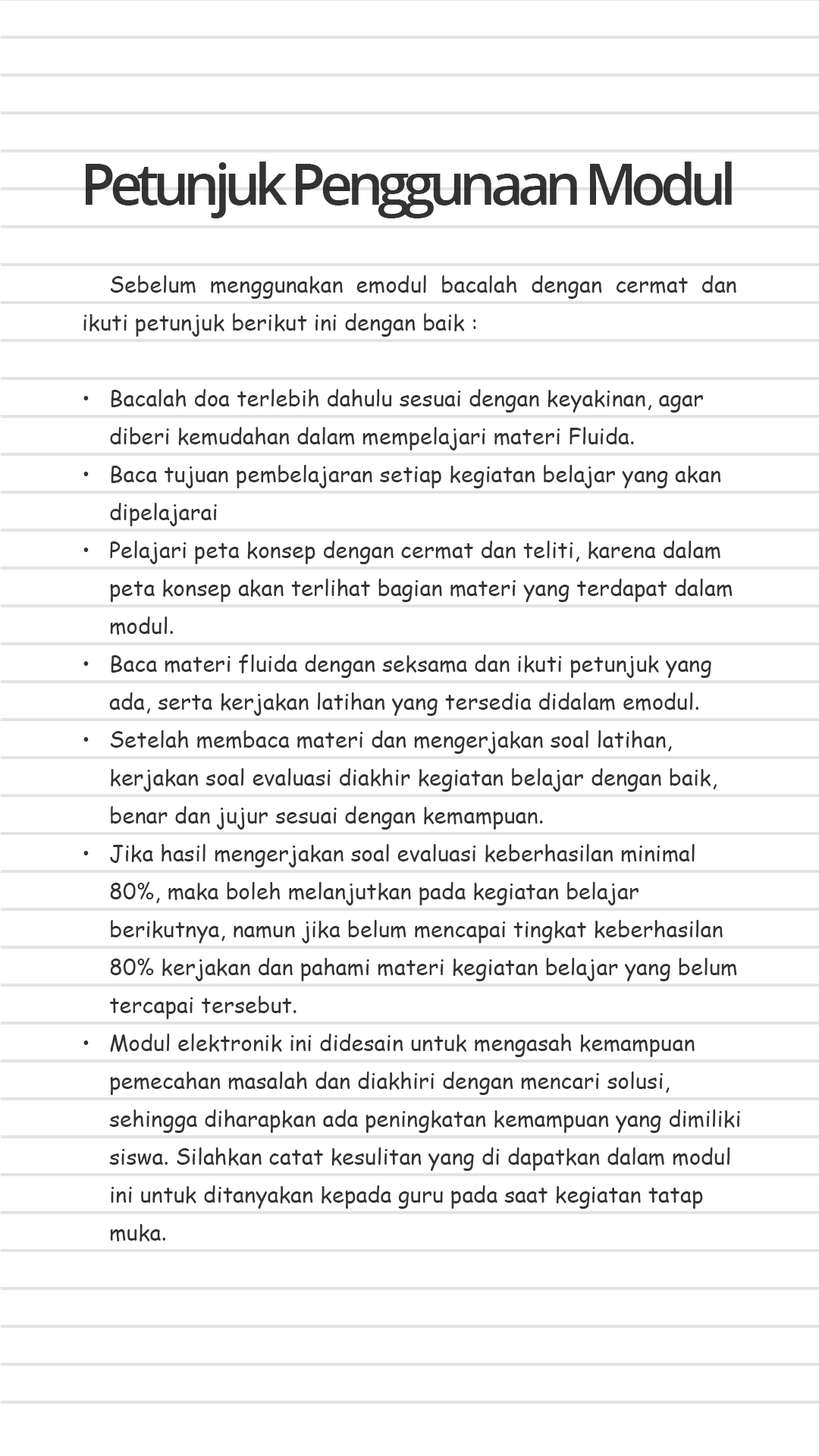
<style>
.page{position:relative;width:819px;height:1456px;background:#ffffff}
.page>*{position:absolute;margin:0}
.t1{font:56.9px "OpenSans-SemiBold";letter-spacing:-0.1em;color:#333333}
.t2{font:22.1px/37.9px "ComicSansMS";color:#333333}
</style>
<div class="page">
<p class="t1" style="left:86px;top:162px;width:646px;height:56px">Petunjuk Penggunaan Modul</p>
<p class="t2" style="left:83px;top:275px;width:657px;height:966px;text-align:justify">Sebelum menggunakan emodul bacalah dengan cermat dan ikuti petunjuk berikut ini dengan baik :<br><br>• Bacalah doa terlebih dahulu sesuai dengan keyakinan, agar    diberi kemudahan dalam mempelajari materi Fluida.<br>• Baca tujuan pembelajaran setiap kegiatan belajar yang akan    dipelajarai<br>• Pelajari peta konsep dengan cermat dan teliti, karena dalam    peta konsep akan terlihat bagian materi yang terdapat dalam   modul.<br>• Baca materi fluida dengan seksama dan ikuti petunjuk yang    ada, serta kerjakan latihan yang tersedia didalam emodul. <br>• Setelah membaca materi dan mengerjakan soal latihan,      kerjakan soal evaluasi diakhir kegiatan belajar dengan baik,    benar dan jujur sesuai dengan kemampuan.  <br>• Jika hasil mengerjakan soal evaluasi keberhasilan minimal     80%, maka boleh melanjutkan pada kegiatan belajar      berikutnya, namun jika belum mencapai tingkat keberhasilan    80% kerjakan dan pahami materi kegiatan belajar yang belum   tercapai tersebut. <br>• Modul elektronik ini didesain untuk mengasah kemampuan     pemecahan masalah dan diakhiri dengan mencari solusi,     sehingga diharapkan ada peningkatan kemampuan yang dimiliki   siswa. Silahkan catat kesulitan yang di dapatkan dalam modul   ini untuk ditanyakan kepada guru pada saat kegiatan tatap    muka.</p>
</div>
